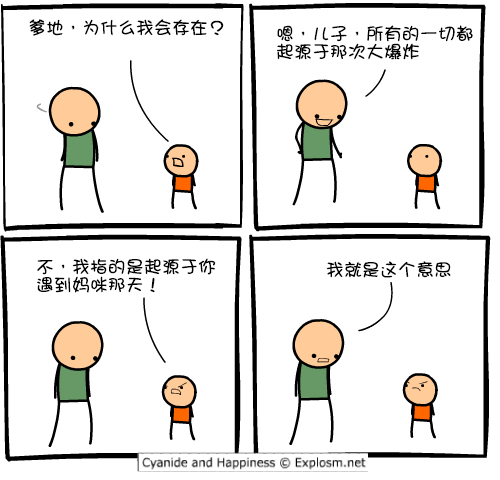
<style>
.page{position:relative;width:500px;height:480px;background:#ffffff}
.page>*{position:absolute;margin:0}
.t1{font:18px "DFGirl";color:#000000}
.t2{font:18px/18px "DFGirl";color:#000000}
</style>
<div class="page">
<p class="t1" style="left:29px;top:19px;width:195px;height:17px">爹地，为什么我会存在？</p>
<p class="t2" style="left:277px;top:25px;width:196px;height:35px">嗯，儿子，所有的一切都<br>起源于那次大爆炸</p>
<p class="t2" style="left:37px;top:258px;width:179px;height:35px">不，我指的是起源于你<br>遇到妈咪那天！</p>
<p class="t1" style="left:326px;top:261px;width:125px;height:17px">我就是这个意思</p>
</div>
